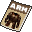
<style>
.page{position:relative;width:32px;height:32px;background:#ffffff}
.page>*{position:absolute;margin:0}
.t1{font:6.9px "RubikMonoOne-Regular";color:#ffffff}
</style>
<div class="page">
<p class="t1" style="left:9px;top:3px;width:19px;height:10px;rotate:18deg">ARM</p>
</div>
